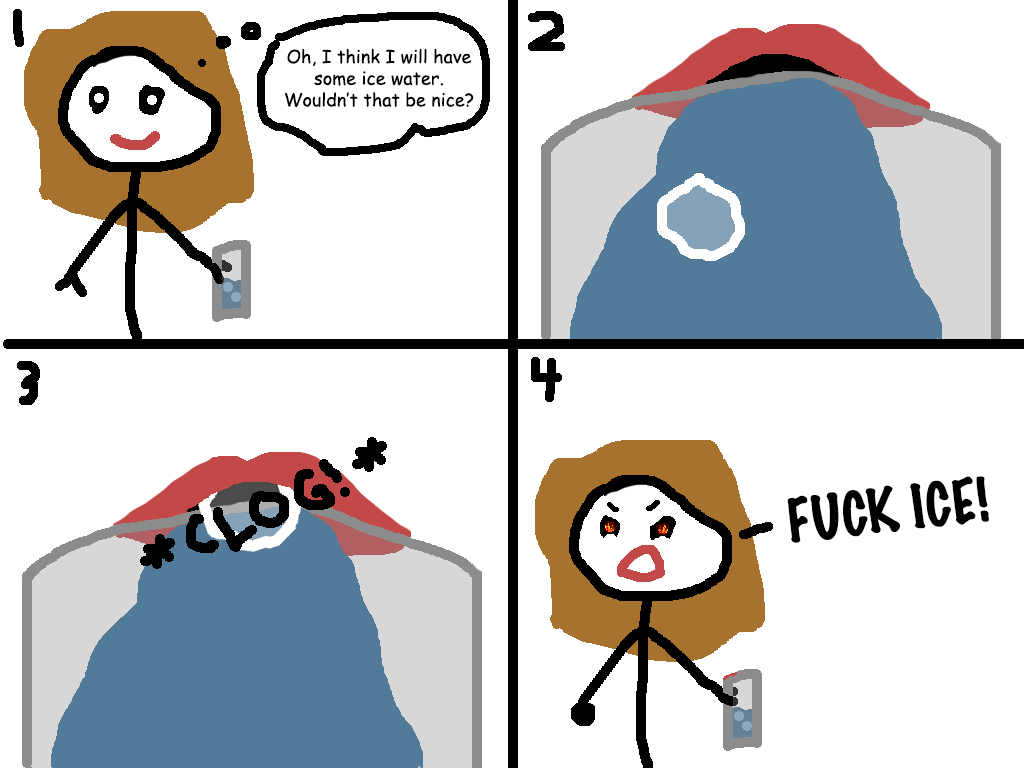
<style>
.page{position:relative;width:1024px;height:768px;background:#ffffff}
.page>*{position:absolute;margin:0}
.t1{font:18px "ComicSansMS";color:#000000}
.t2{font:55px "MarkerFelt-Thin";color:#000000}
</style>
<div class="page">
<p class="t1" style="left:285px;top:48px;width:189px;height:60px;text-align:center">Oh, I think I will have<br>some ice water.<br>Wouldn’t that be nice?</p>
<p class="t2" style="left:787px;top:476px;width:202px;height:67px;rotate:-6deg">FUCK ICE!</p>
</div>
